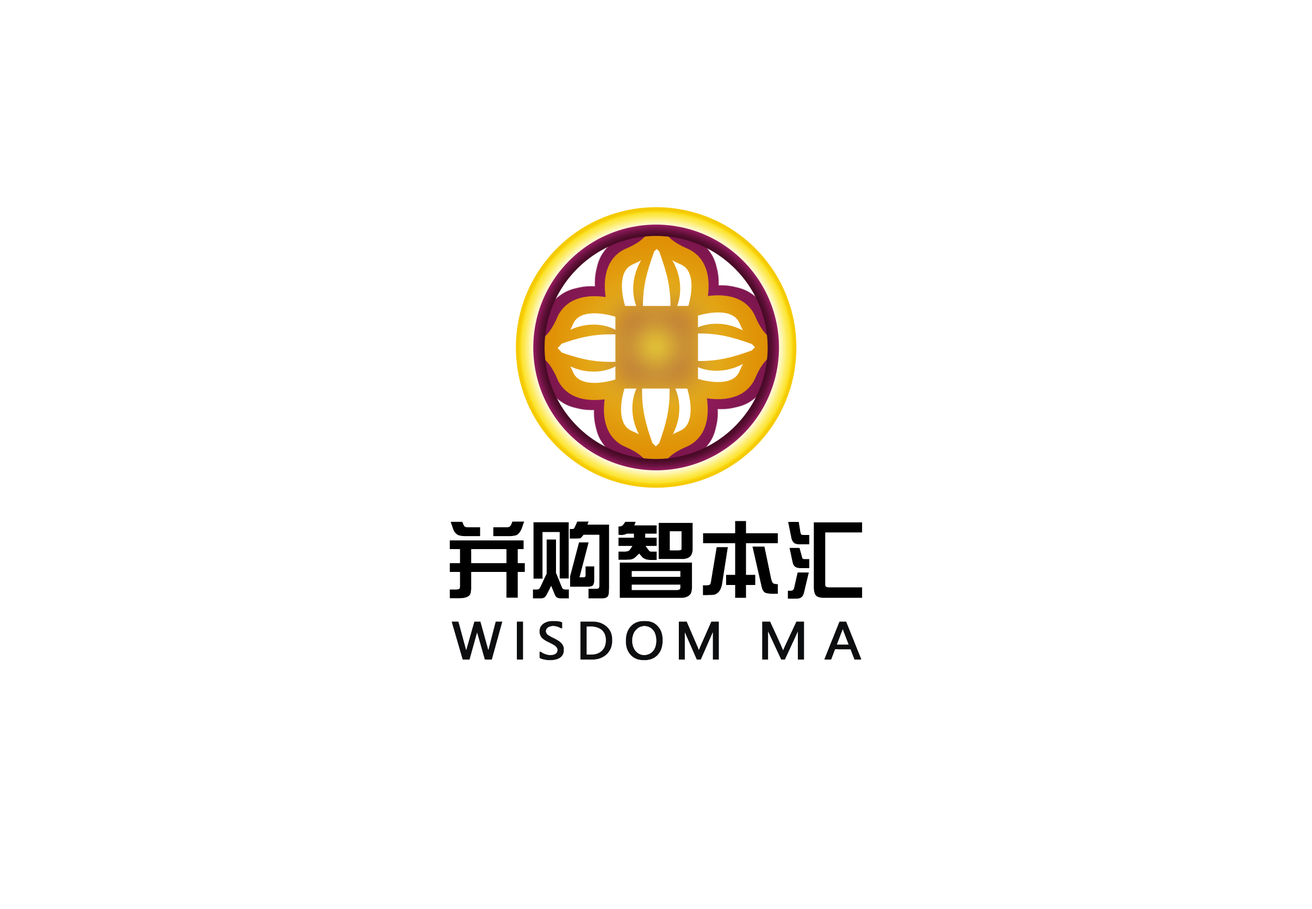
<style>
.page{position:relative;width:1312px;height:909px;background:#ffffff}
.page>*{position:absolute;margin:0}
.t1{font:84.3px "HYk1gj";color:#000000}
.t2{font:49.5px "MicrosoftYaHei";letter-spacing:0.18em;color:#0d0e10;font-weight:bold}
</style>
<div class="page">
<p class="t1" style="left:450px;top:521px;width:413px;height:78px">并购智本汇</p>
<p class="t2" style="left:452px;top:621px;width:410px;height:39px">WISDOM ＭＡ</p>
</div>
